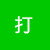
<style>
.page{position:relative;width:50px;height:50px;background:#00c800}
.page>*{position:absolute;margin:0}
.t1{font:18px "MicrosoftYaHei";color:#ffffff}
</style>
<div class="page">
<p class="t1" style="left:15px;top:16px;width:18px;height:18px">打</p>
</div>
